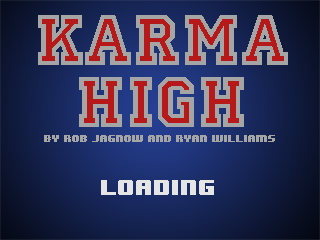
<style>
.page{position:relative;width:320px;height:240px}
.page>*{position:absolute;margin:0}
.t1{font:75px/62.5px "Allstar-Regular";color:#a5a5a5}
.t2{font:8px "8BITWONDERNominal";color:#a5a5a5}
.t3{font:18px "8BITWONDERNominal";color:#e5e5e5}
</style>
<div class="page">
<p class="t1" style="left:38px;top:15px;width:250px;height:112px;text-align:center">KARMA<br>HIGH</p>
<p class="t2" style="left:44px;top:135px;width:231px;height:7px">By Rob Jagnow and Ryan Williams</p>
<p class="t3" style="left:101px;top:180px;width:113px;height:15px">Loading</p>
</div>
